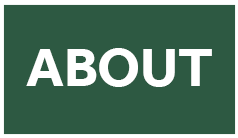
<style>
.page{position:relative;width:238px;height:138px;background:#2d5942}
.page>*{position:absolute;margin:0}
.t1{font:55.5px "Effra-Bold";color:#ffffff}
</style>
<div class="page">
<p class="t1" style="left:26px;top:48px;width:186px;height:39px">ABOUT</p>
</div>
